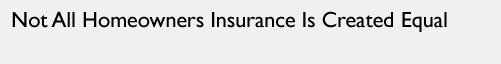
<style>
.page{position:relative;width:501px;height:64px;background:#f0f0f0}
.page>*{position:absolute;margin:0}
.t1{font:22px "GillSansMT";color:#000000}
</style>
<div class="page">
<p class="t1" style="left:12px;top:11px;width:435px;height:21px">Not All Homeowners Insurance Is Created Equal</p>
</div>
